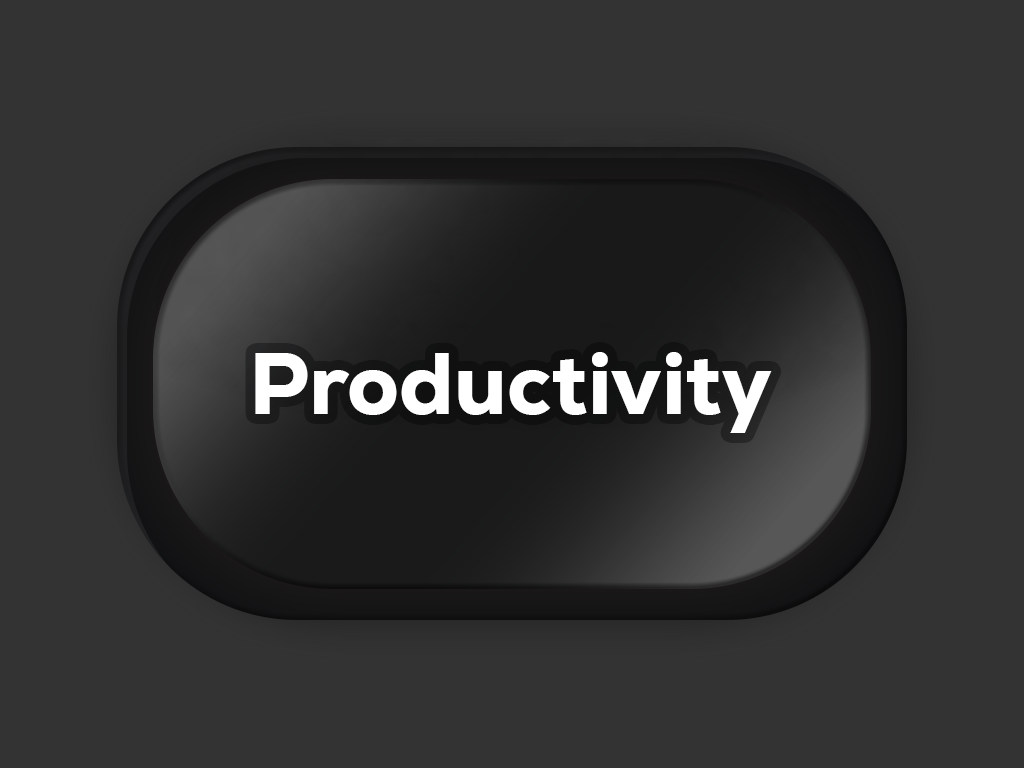
<style>
.page{position:relative;width:1024px;height:768px;background:#333333}
.page>*{position:absolute;margin:0}
.t1{font:86px "Nexa-Heavy";color:#ffffff}
</style>
<div class="page">
<p class="t1" style="left:255px;top:352px;width:517px;height:81px">Productivity</p>
</div>
